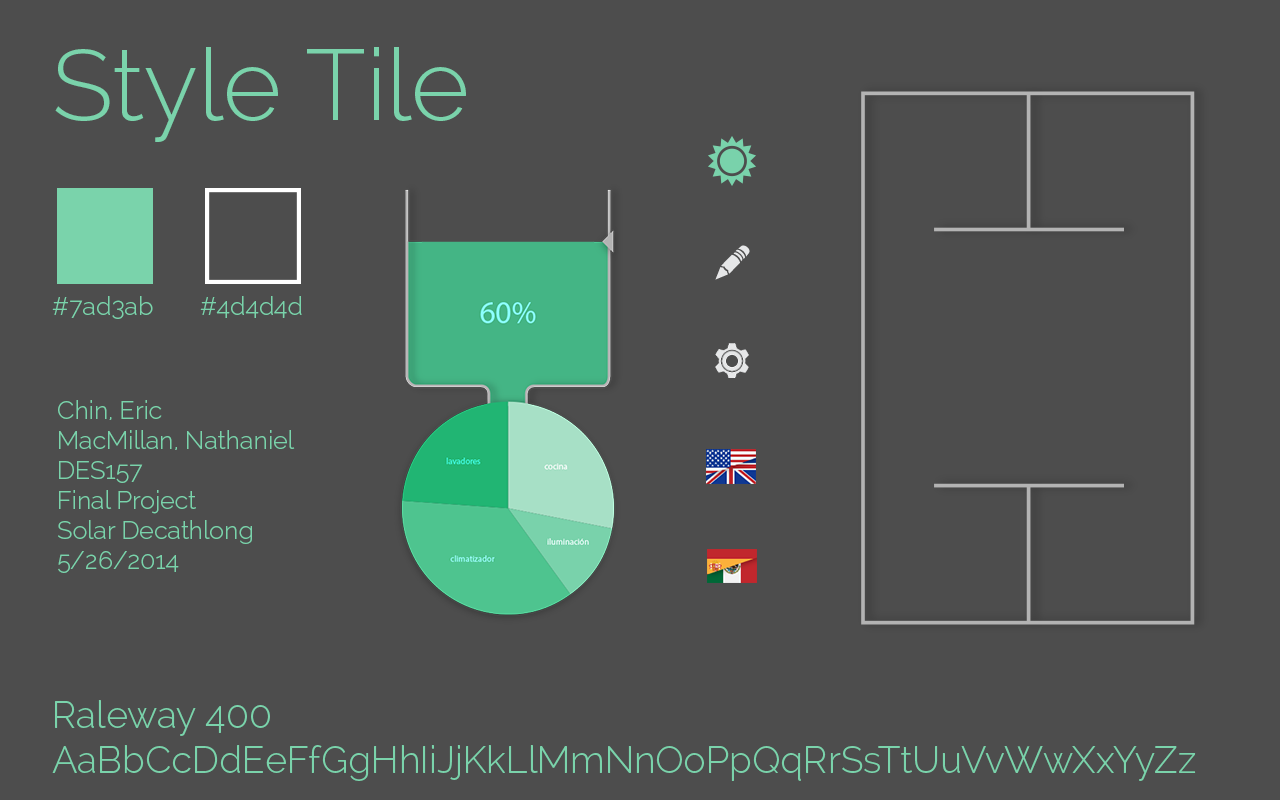
<style>
.page{position:relative;width:1280px;height:800px;background:#4d4d4d}
.page>*{position:absolute;margin:0}
.t1{font:100px "Raleway-Light";color:#7ad3ab}
.t2{font:25px "Raleway-Light";color:#7ad3ab}
.t3{font:37.5px "Raleway-Light";color:#7ad3ab}
</style>
<div class="page">
<p class="t1" style="left:55px;top:47px;width:411px;height:95px">Style Tile</p>
<p class="t2" style="left:52px;top:296px;width:101px;height:23px">#7ad3ab</p>
<p class="t2" style="left:200px;top:296px;width:102px;height:22px">#4d4d4d</p>
<p class="t2" style="left:58px;top:400px;width:237px;height:173px">Chin, Eric<br>MacMillan, Nathaniel<br>DES157<br>Final Project<br>Solar Decathlong<br>5/26/2014</p>
<p class="t3" style="left:52px;top:700px;width:1144px;height:81px">Raleway 400<br>AaBbCcDdEeFfGgHhIiJjKkLlMmNnOoPpQqRrSsTtUuVvWwXxYyZz</p>
</div>
